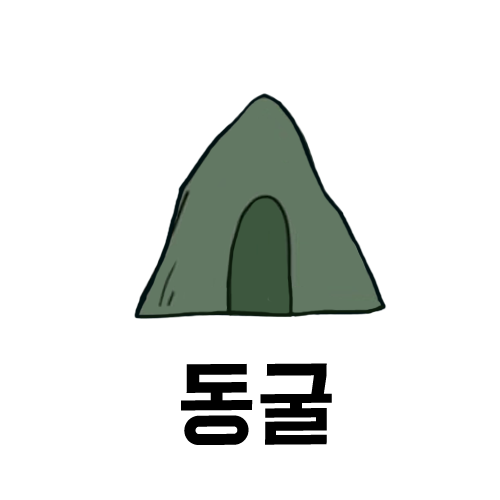
<style>
.page{position:relative;width:500px;height:500px;background:#ffffff}
.page>*{position:absolute;margin:0}
.t1{font:85.8px "BMDoHyeon";color:#000000;scale:0.96 1}
</style>
<div class="page">
<p class="t1" style="left:181px;top:363px;width:151px;height:82px">동굴</p>
</div>
